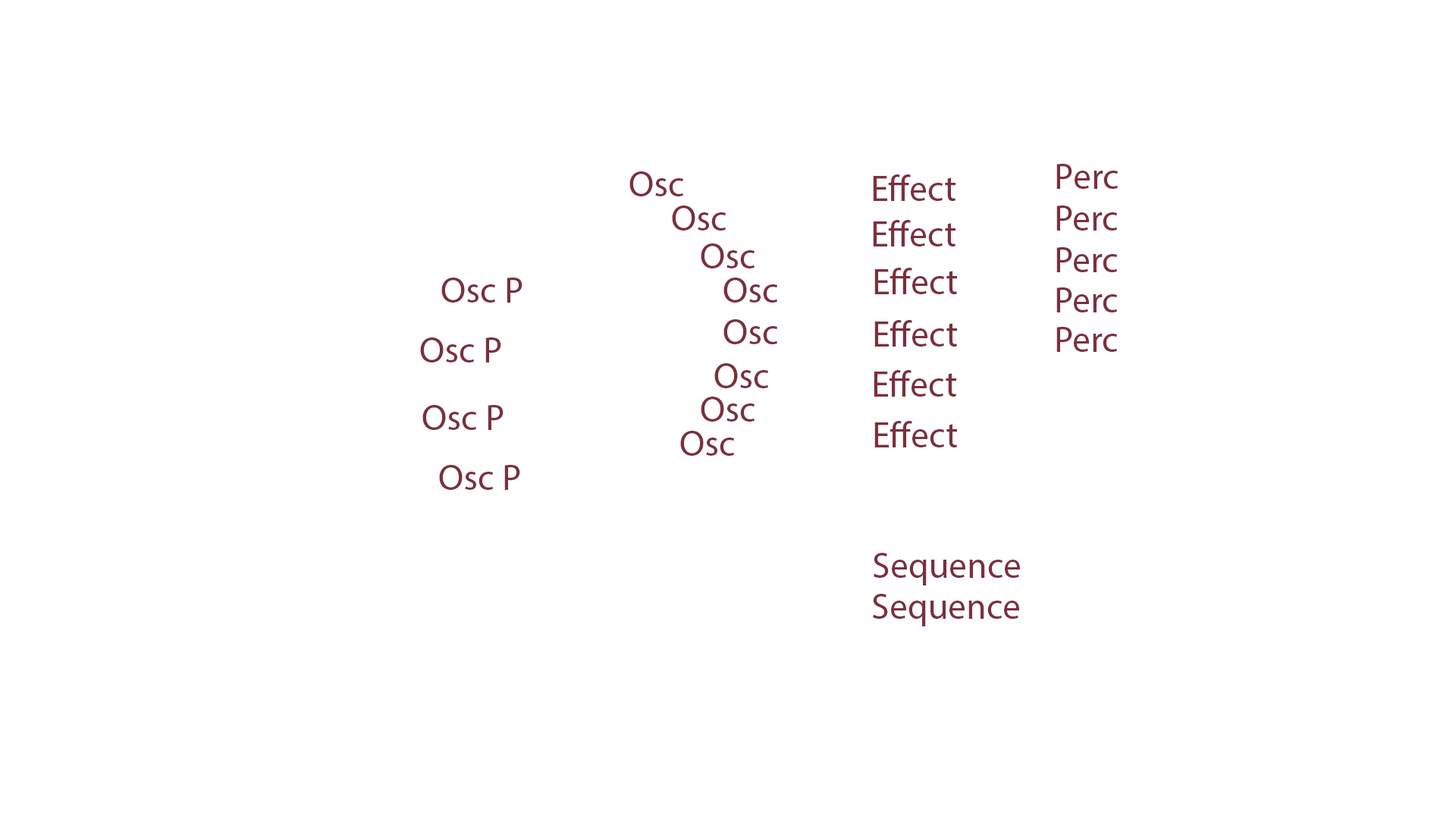
<style>
.page{position:relative;width:1456px;height:819px;background:#ffffff}
.page>*{position:absolute;margin:0}
.t1{font:36.4px "MyriadPro-Regular";color:#7b303d}
</style>
<div class="page">
<p class="t1" style="left:629px;top:171px;width:54px;height:25px">Osc</p>
<p class="t1" style="left:1056px;top:164px;width:62px;height:25px">Perc</p>
<p class="t1" style="left:873px;top:174px;width:82px;height:27px">Effect</p>
<p class="t1" style="left:672px;top:206px;width:54px;height:25px">Osc</p>
<p class="t1" style="left:1056px;top:206px;width:61px;height:25px">Perc</p>
<p class="t1" style="left:873px;top:220px;width:82px;height:26px">Effect</p>
<p class="t1" style="left:701px;top:243px;width:54px;height:25px">Osc</p>
<p class="t1" style="left:1056px;top:247px;width:61px;height:25px">Perc</p>
<p class="t1" style="left:874px;top:268px;width:83px;height:26px">Effect</p>
<p class="t1" style="left:441px;top:278px;width:81px;height:25px">Osc P</p>
<p class="t1" style="left:723px;top:278px;width:54px;height:25px">Osc</p>
<p class="t1" style="left:1056px;top:287px;width:61px;height:25px">Perc</p>
<p class="t1" style="left:723px;top:319px;width:54px;height:25px">Osc</p>
<p class="t1" style="left:874px;top:320px;width:83px;height:27px">Effect</p>
<p class="t1" style="left:1056px;top:327px;width:61px;height:25px">Perc</p>
<p class="t1" style="left:420px;top:337px;width:81px;height:25px">Osc P</p>
<p class="t1" style="left:714px;top:363px;width:54px;height:25px">Osc</p>
<p class="t1" style="left:874px;top:370px;width:82px;height:27px">Effect</p>
<p class="t1" style="left:701px;top:397px;width:54px;height:25px">Osc</p>
<p class="t1" style="left:422px;top:405px;width:82px;height:25px">Osc P</p>
<p class="t1" style="left:874px;top:421px;width:83px;height:26px">Effect</p>
<p class="t1" style="left:680px;top:431px;width:54px;height:25px">Osc</p>
<p class="t1" style="left:439px;top:465px;width:81px;height:25px">Osc P</p>
<p class="t1" style="left:874px;top:553px;width:146px;height:32px">Sequence</p>
<p class="t1" style="left:873px;top:594px;width:146px;height:32px">Sequence</p>
</div>
